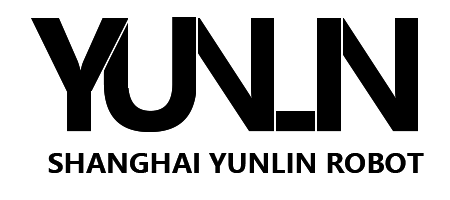
<style>
.page{position:relative;width:450px;height:200px;background:#ffffff}
.page>*{position:absolute;margin:0}
.t1{font:27px "MicrosoftYaHei-Bold";color:#000000}
</style>
<div class="page">
<p class="t1" style="left:48px;top:153px;width:376px;height:20px">SHANGHAI YUNLIN ROBOT</p>
</div>
